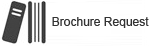
<style>
.page{position:relative;width:150px;height:46px;background:#ffffff}
.page>*{position:absolute;margin:0}
.t1{font:12px "ArialMT";color:#333333}
</style>
<div class="page">
<p class="t1" style="left:52px;top:17px;width:97px;height:11px">Brochure Request</p>
</div>
